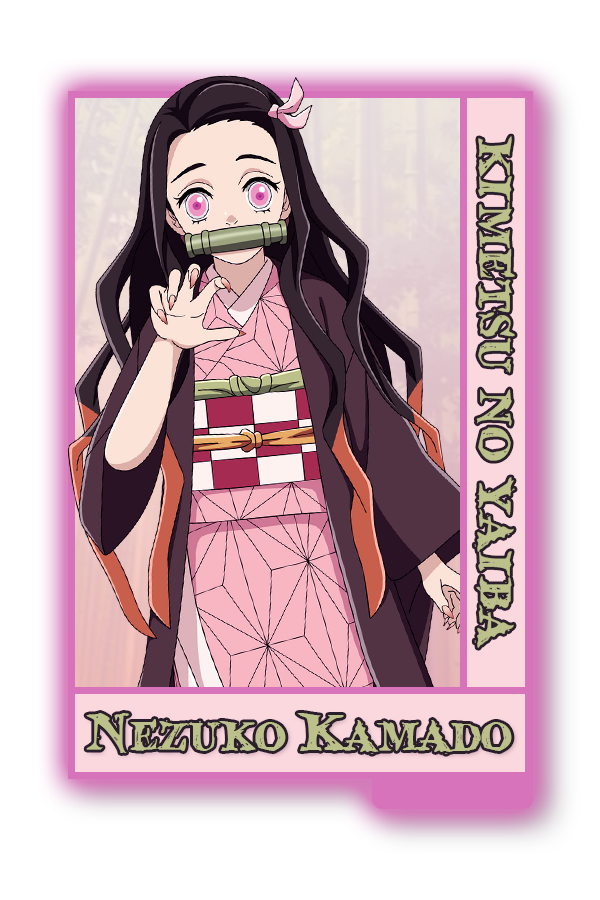
<style>
.page{position:relative;width:600px;height:900px;background:#ffffff}
.page>*{position:absolute;margin:0}
.t1{font:66.7px "BloodCrow";color:#b9c484}
.t2{font:59.7px "BloodCrow";color:#b9c484}
</style>
<div class="page">
<p class="t1" style="left:474px;top:136px;width:41px;height:512px;rotate:90deg">kimetsu no yaiba</p>
<p class="t2" style="left:86px;top:713px;width:426px;height:41px">Nezuko Kamado</p>
</div>
